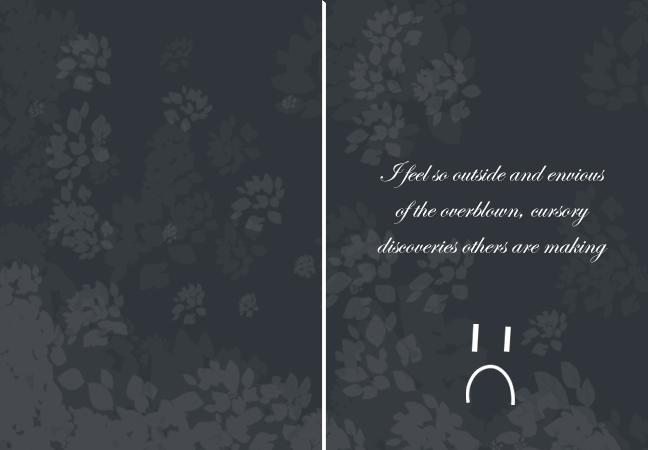
<style>
.page{position:relative;width:648px;height:450px;background:#2f353a}
.page>*{position:absolute;margin:0}
.t1{font:30px "EdwardianScriptITC";color:#ffffff}
</style>
<div class="page">
<p class="t1" style="left:377px;top:161px;width:231px;height:102px;text-align:center">I feel so outside and envious of the overblown, cursory discoveries others are making</p>
</div>
